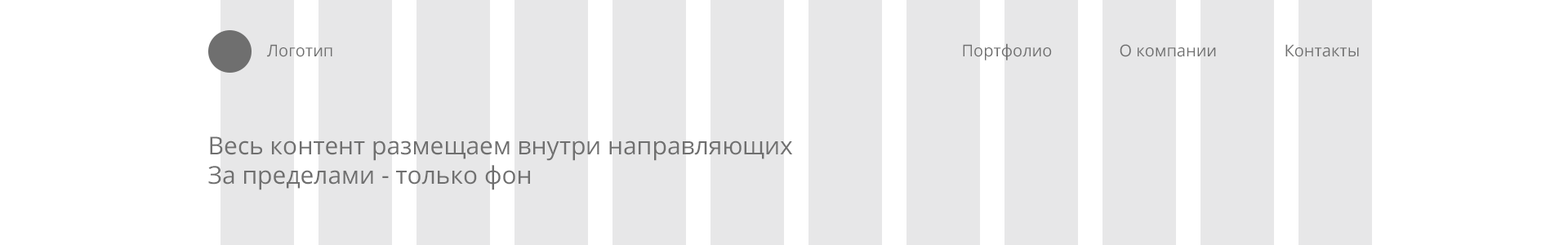
<style>
.page{position:relative;width:1568px;height:245px;background:#e7e7e8}
.page>*{position:absolute;margin:0}
.t1{font:16.3px "OpenSans";color:#6f6f6f}
.t2{font:24.5px/29.4px "OpenSans";color:#6f6f6f}
</style>
<div class="page">
<p class="t1" style="left:267px;top:44px;width:65px;height:13px">Логотип</p>
<p class="t1" style="left:963px;top:43px;width:89px;height:17px">Портфолио</p>
<p class="t1" style="left:1120px;top:44px;width:96px;height:13px">О компании</p>
<p class="t1" style="left:1285px;top:44px;width:74px;height:13px">Контакты</p>
<p class="t2" style="left:208px;top:136px;width:584px;height:54px">Весь контент размещаем внутри направляющих<br>За пределами - только фон</p>
</div>
